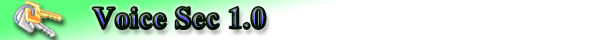
<style>
.page{position:relative;width:600px;height:40px;background:#ffffff}
.page>*{position:absolute;margin:0}
.t1{font:30px "TimesNewRomanPS-BoldMT"}
</style>
<div class="page">
<p class="t1" style="left:93px;top:7px;width:172px;height:22px">Voice Sec 1.0</p>
</div>
